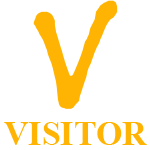
<style>
.page{position:relative;width:150px;height:150px;background:#ffffff}
.page>*{position:absolute;margin:0}
.t1{font:156px "BuxtonSketch";color:#ffb302}
.t2{font:34px "TimesNewRomanPS-BoldMT";color:#ffb302}
</style>
<div class="page">
<p class="t1" style="left:33px;top:0px;width:85px;height:109px">V</p>
<p class="t2" style="left:4px;top:122px;width:143px;height:23px">VISITOR</p>
</div>
